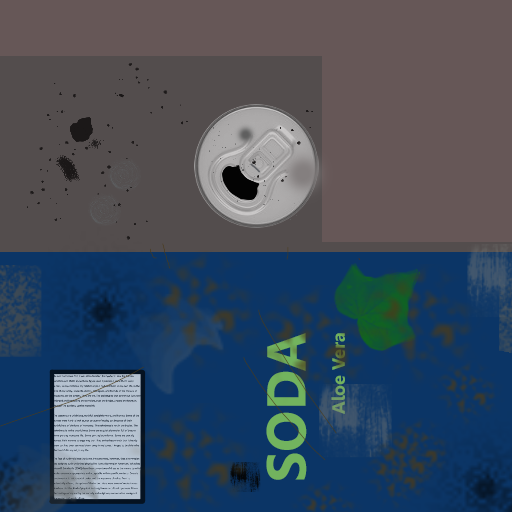
<style>
.page{position:relative;width:512px;height:512px;background:#665757}
.page>*{position:absolute;margin:0}
.t1{font:54.5px "Leelawadee-Bold";color:#72b25f}
.t2{font:18px "Leelawadee-Bold"}
</style>
<div class="page">
<p class="t1" style="left:266px;top:333px;width:41px;height:147px;rotate:-90deg">SODA</p>
<p class="t2" style="left:331px;top:333px;width:14px;height:81px;rotate:-90deg">Aloe Vera</p>
</div>
